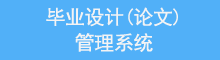
<style>
.page{position:relative;width:220px;height:60px;background:#51b0f8}
.page>*{position:absolute;margin:0}
.t1{font:20px/25.7px "SimHei";letter-spacing:-0.02em;color:#f3f3f4}
</style>
<div class="page">
<p class="t1" style="left:46px;top:7px;width:132px;height:45px;text-align:center">毕业设计(论文)<br>管理系统</p>
</div>
